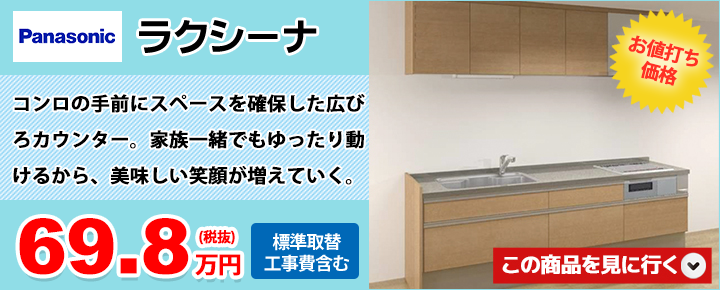
<style>
.page{position:relative;width:720px;height:290px}
.page>*{position:absolute;margin:0}
.t1{font:37.7px "NIS-S8-83pv-RKSJ-H";letter-spacing:-0.005em;color:#000000}
.t2{font:18.7px "KozGoPr6N-Bold";letter-spacing:-0.05em;color:#ff3124;font-weight:bold}
.t3{font:19px/36px "KozGoPr6N-Bold";letter-spacing:-0.005em;color:#000000;font-weight:bold}
.t4{font:76px "Arial-Black";letter-spacing:-0.01em;color:#ff0000}
.t5{font:14.2px "KozGoPr6N-Bold";letter-spacing:-0.05em;color:#ff0000;font-weight:bold}
.t6{font:18px "KozGoPro-Bold";letter-spacing:-0.05em;color:#ffffff}
.t7{font:23.7px "KozGoPr6N-Bold";letter-spacing:-0.05em;color:#ff0000;font-weight:bold}
</style>
<div class="page">
<p class="t1" style="left:139px;top:20px;width:178px;height:34px">ラクシーナ</p>
<p class="t2" style="left:628px;top:35px;width:71px;height:51px;text-align:center;rotate:14deg">お値打ち<br>価格</p>
<p class="t3" style="left:13px;top:94px;width:352px;height:91px">コンロの手前にスペースを確保した広びろカウンター。家族一緒でもゆったり動けるから、美味しい笑顔が増えていく。</p>
<p class="t4" style="left:19px;top:218px;width:170px;height:57px">69.8</p>
<p class="t5" style="left:199px;top:229px;width:36px;height:16px">(税抜)</p>
<p class="t6" style="left:264px;top:233px;width:86px;height:39px;text-align:center">標準取替<br>工事費含む</p>
<p class="t7" style="left:195px;top:254px;width:46px;height:22px">万円</p>
</div>
